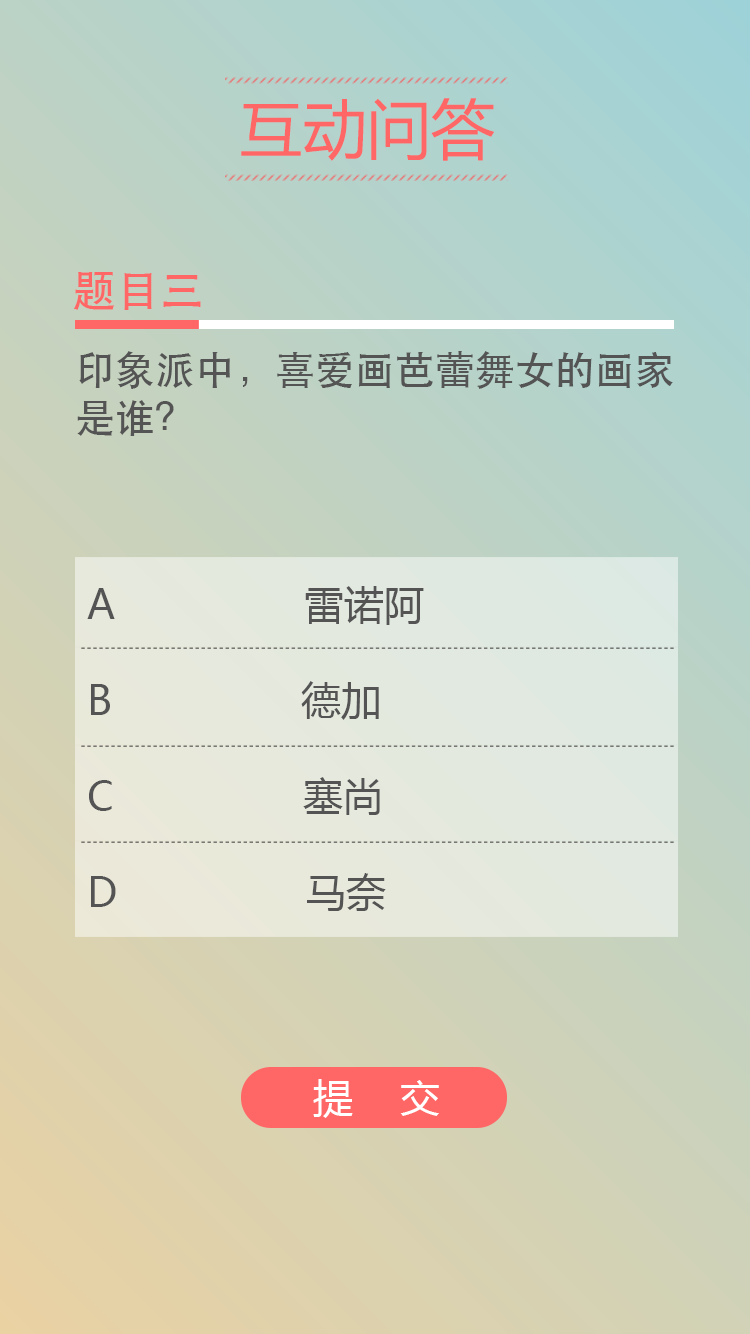
<style>
.page{position:relative;width:750px;height:1334px}
.page>*{position:absolute;margin:0}
.t1{font:64px "MicrosoftYaHei";color:#ff6666}
.t2{font:44px "STHeitiSC-Medium";color:#ff6666}
.t3{font:40px "MicrosoftYaHei";color:#545454}
.t4{font:40px "STHeitiSC-Medium";color:#545454}
.t5{font:40px "MicrosoftYaHei";color:#ffffff}
</style>
<div class="page">
<p class="t1" style="left:241px;top:98px;width:254px;height:63px">互动问答</p>
<p class="t2" style="left:73px;top:272px;width:128px;height:38px">题目三</p>
<p class="t3" style="left:77px;top:351px;width:596px;height:560px"><span class="t4">印象派中，喜爱画芭蕾舞女的画家是谁？<br><br><br><br></span> A                雷诺阿<br><br> B                德加<br><br> C                塞尚<br><br> D                马奈</p>
<p class="t5" style="left:313px;top:1079px;width:126px;height:39px">提    交</p>
</div>
